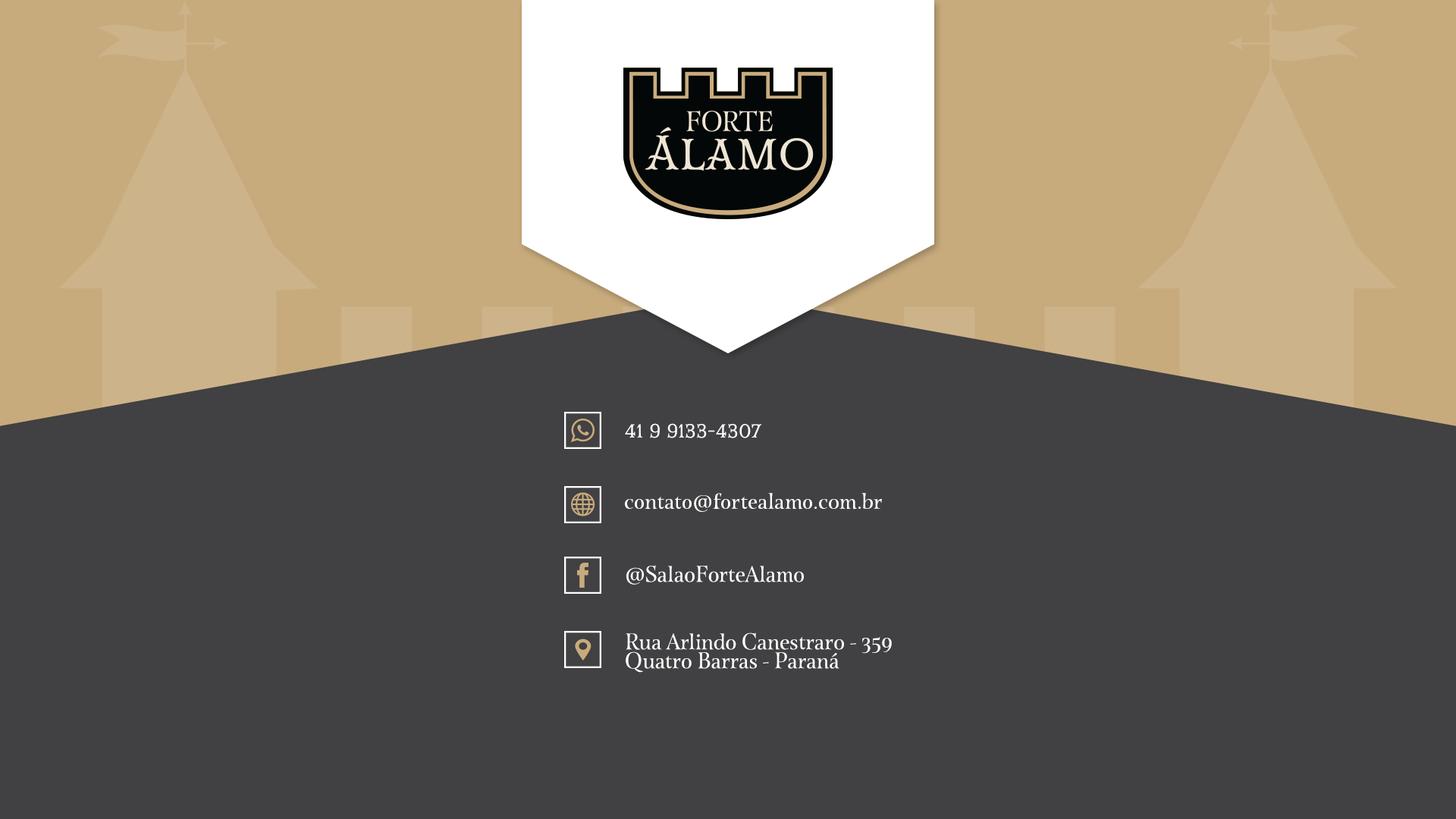
<style>
.page{position:relative;width:1456px;height:819px;background:#414042}
.page>*{position:absolute;margin:0}
.t1{font:19px "MrDarcyW01-Regular";color:#ffffff}
.t2{font:22.1px "EsmeraldaPro";color:#ffffff}
.t3{font:22.1px/18.9px "EsmeraldaPro";color:#ffffff}
</style>
<div class="page">
<p class="t1" style="left:625px;top:423px;width:137px;height:15px">41 9 9133-4307</p>
<p class="t2" style="left:625px;top:493px;width:257px;height:19px">contato@fortealamo.com.br</p>
<p class="t2" style="left:626px;top:565px;width:178px;height:20px">@SalaoForteAlamo</p>
<p class="t3" style="left:626px;top:632px;width:266px;height:41px">Rua Arlindo Canestraro - 359<br>Quatro Barras - Paraná</p>
</div>
